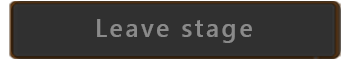
<style>
.page{position:relative;width:350px;height:60px;background:#303030}
.page>*{position:absolute;margin:0}
.t1{font:25px "YuGothicUI-Bold";letter-spacing:0.1em;color:#8a8a8a}
</style>
<div class="page">
<p class="t1" style="left:97px;top:19px;width:155px;height:24px">Leave stage</p>
</div>
